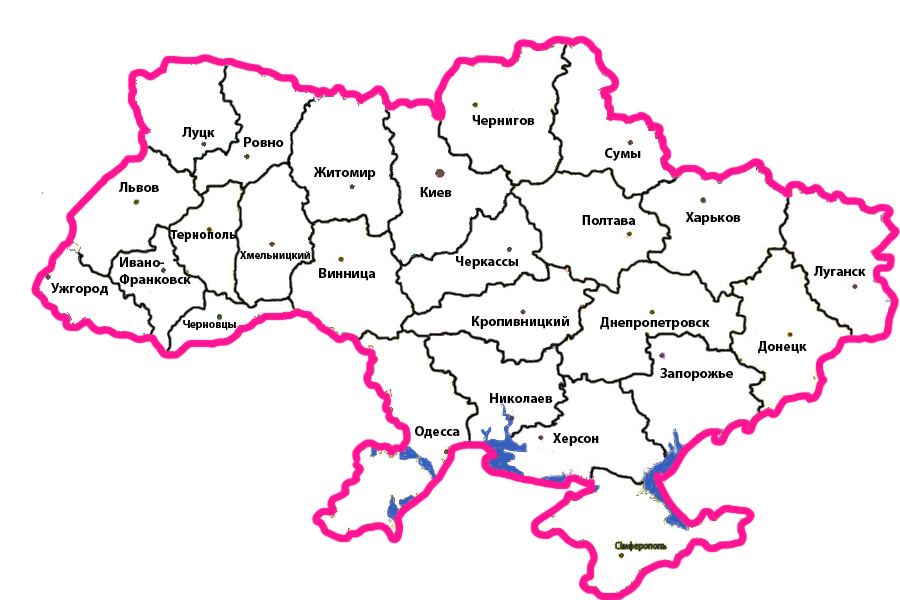
<style>
.page{position:relative;width:900px;height:600px;background:#ffffff}
.page>*{position:absolute;margin:0}
.t1{font:14px "MyriadPro-Bold";color:#000000}
.t2{font:13px "MyriadPro-Bold";color:#000000}
.t3{font:11px "MyriadPro-Bold";color:#000000}
</style>
<div class="page">
<p class="t1" style="left:472px;top:115px;width:63px;height:13px">Чернигов</p>
<p class="t1" style="left:182px;top:127px;width:33px;height:13px">Луцк</p>
<p class="t1" style="left:244px;top:137px;width:40px;height:10px">Ровно</p>
<p class="t1" style="left:605px;top:148px;width:36px;height:13px">Сумы</p>
<p class="t1" style="left:314px;top:167px;width:62px;height:13px">Житомир</p>
<p class="t1" style="left:119px;top:182px;width:40px;height:10px">Львов</p>
<p class="t1" style="left:420px;top:187px;width:32px;height:10px">Киев</p>
<p class="t1" style="left:582px;top:215px;width:53px;height:10px">Полтава</p>
<p class="t1" style="left:685px;top:212px;width:56px;height:13px">Харьков</p>
<p class="t2" style="left:170px;top:230px;width:66px;height:12px">Тернополь</p>
<p class="t1" style="left:119px;top:257px;width:72px;height:30px">Ивано-<br>Франковск</p>
<p class="t3" style="left:240px;top:251px;width:70px;height:10px">Хмельницкий</p>
<p class="t1" style="left:456px;top:256px;width:62px;height:13px">Черкассы</p>
<p class="t1" style="left:319px;top:268px;width:56px;height:13px">Винница</p>
<p class="t1" style="left:814px;top:266px;width:52px;height:13px">Луганск</p>
<p class="t1" style="left:51px;top:283px;width:57px;height:13px">Ужгород</p>
<p class="t1" style="left:472px;top:316px;width:97px;height:13px">Кропивницкий</p>
<p class="t1" style="left:600px;top:317px;width:110px;height:13px">Днепропетровск</p>
<p class="t3" style="left:183px;top:320px;width:53px;height:10px">Черновцы</p>
<p class="t1" style="left:758px;top:341px;width:49px;height:13px">Донецк</p>
<p class="t1" style="left:660px;top:368px;width:73px;height:13px">Запорожье</p>
<p class="t1" style="left:490px;top:393px;width:63px;height:10px">Николаев</p>
<p class="t1" style="left:553px;top:433px;width:46px;height:13px">Херсон</p>
</div>
